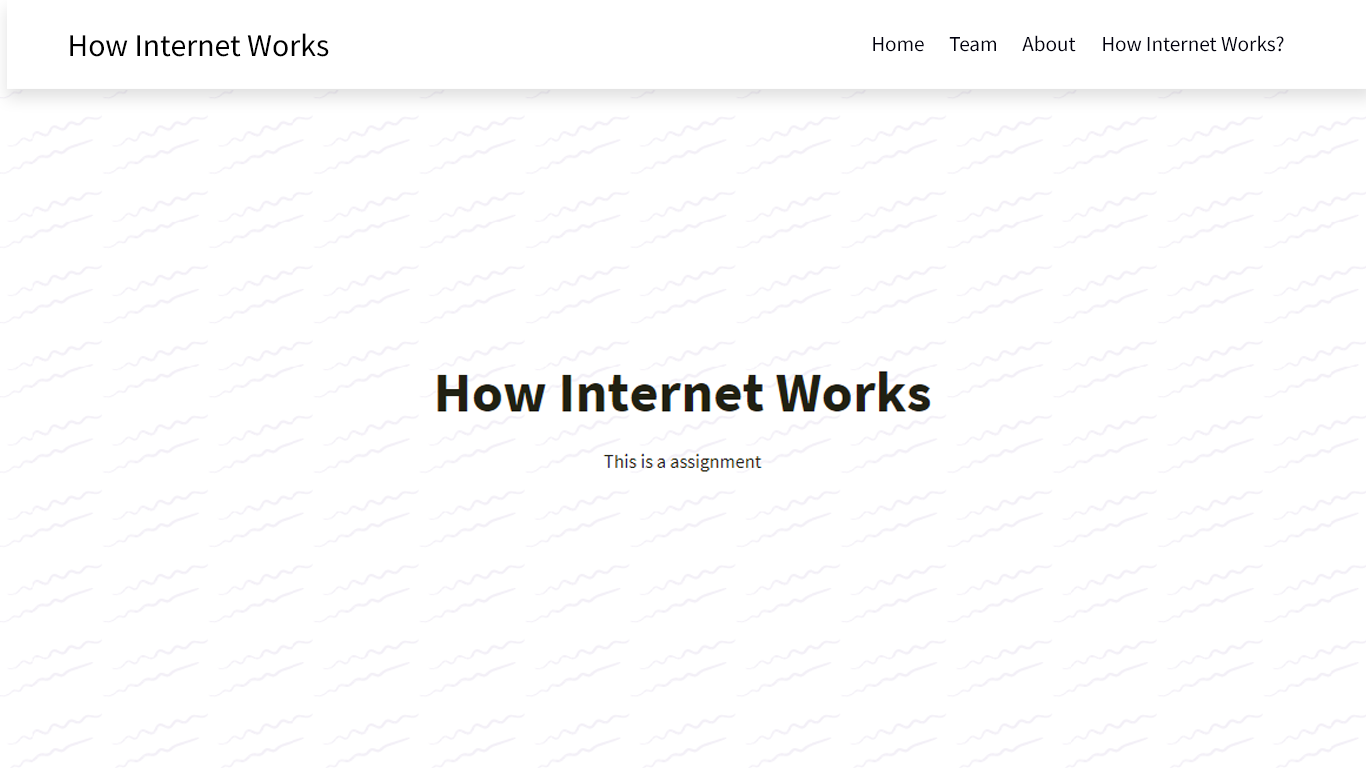
<style>
.page{position:relative;width:1366px;height:768px;background:#ffffff}
.page>*{position:absolute;margin:0}
.t1{font:31.8px "SourceSansPro-Regular";color:#000000}
.t2{font:21.2px "SourceSansPro-Regular";color:#00000e}
</style>
<div class="page">
<p class="t1" style="left:70px;top:33px;width:259px;height:24px">How Internet Works</p>
<p class="t2" style="left:873px;top:37px;width:51px;height:15px">Home</p>
<p class="t2" style="left:949px;top:37px;width:47px;height:15px">Team</p>
<p class="t2" style="left:1022px;top:35px;width:54px;height:17px">About</p>
<p class="t2" style="left:1103px;top:35px;width:181px;height:17px">How Internet Works?</p>
</div>
